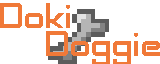
<style>
.page{position:relative;width:160px;height:64px;background:#ffffff}
.page>*{position:absolute;margin:0}
.t1{font:36px "AdventureSubtitlesNormal";color:#f07938}
</style>
<div class="page">
<p class="t1" style="left:0px;top:3px;width:70px;height:25px">Doki</p>
<p class="t1" style="left:46px;top:31px;width:114px;height:35px">Doggie</p>
</div>
